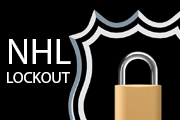
<style>
.page{position:relative;width:180px;height:120px;background:#000000}
.page>*{position:absolute;margin:0}
.t1{font:15.6px "MyriadPro-Regular";color:#ffffff}
.t2{font:36.3px "MyriadPro-Regular";color:#ffffff}
</style>
<div class="page">
<p class="t1" style="left:7px;top:39px;width:64px;height:44px"><span class="t2">NHL<br></span>LOCKOUT</p>
</div>
